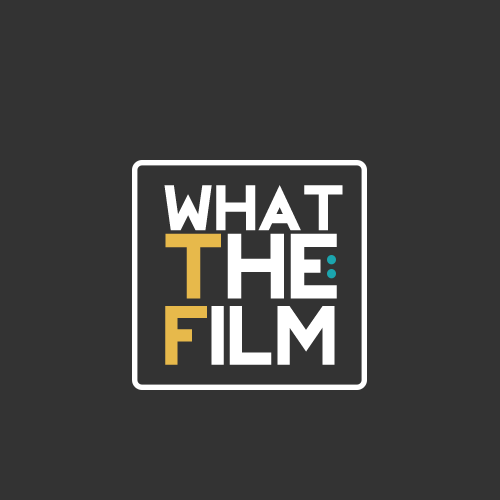
<style>
.page{position:relative;width:500px;height:500px;background:#333333}
.page>*{position:absolute;margin:0}
.t1{font:60.4px/66.7px "REVOLUTION";color:#ffffff}
.t2{font:87.5px/66.7px "REVOLUTION";color:#e7b94b}
.t3{font:87.5px/66.7px "REVOLUTION";color:#ffffff}
.t4{font:79.2px/66.7px "REVOLUTION";color:#e7b94b}
.t5{font:79.2px/66.7px "REVOLUTION";color:#ffffff}
</style>
<div class="page">
<p class="t1" style="left:164px;top:185px;width:179px;height:180px">what<br><span class="t2">T</span><span class="t3">he<br></span><span class="t4">f</span><span class="t5">ilm</span></p>
</div>
